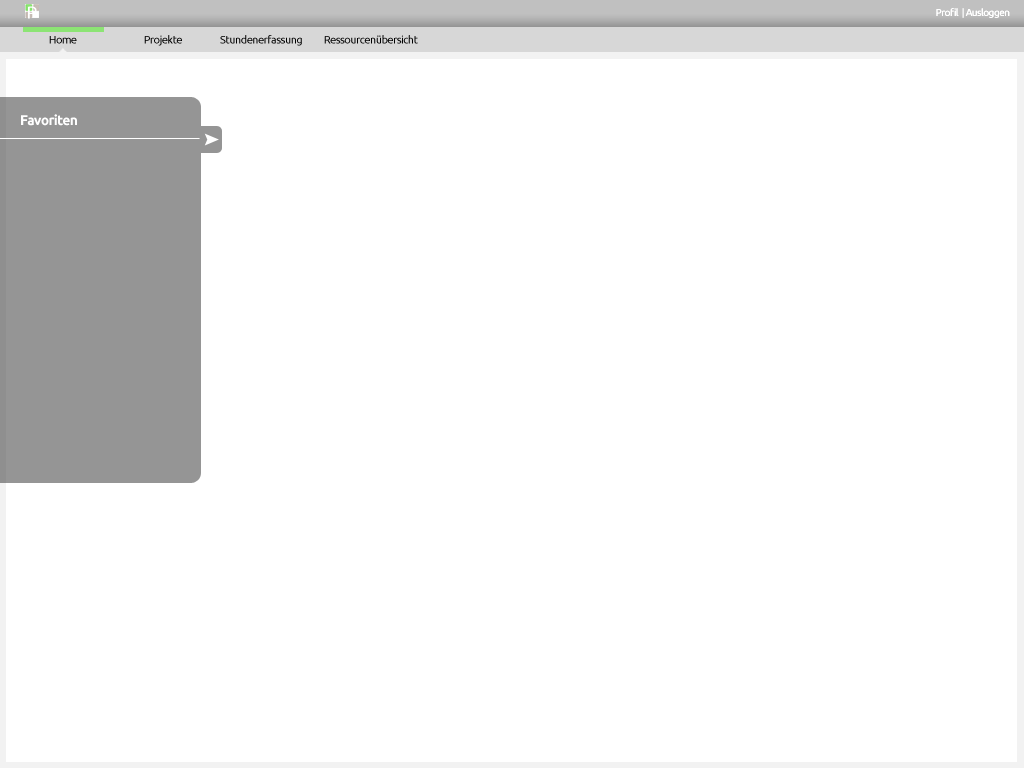
<style>
.page{position:relative;width:1024px;height:768px;background:#ffffff}
.page>*{position:absolute;margin:0}
.t1{font:17px "Ubuntu";letter-spacing:-0.05em;color:#ffffff}
.t2{font:10px "Ubuntu";letter-spacing:-0.05em;color:#ffffff}
.t3{font:11px "Ubuntu";letter-spacing:-0.05em;color:#000000}
.t4{font:14px "Ubuntu-Bold";letter-spacing:-0.05em;color:#ffffff}
</style>
<div class="page">
<p class="t1" style="left:28px;top:6px;width:9px;height:13px">P</p>
<p class="t2" style="left:936px;top:8px;width:74px;height:10px">Profil  | Ausloggen</p>
<p class="t3" style="left:49px;top:36px;width:28px;height:8px">Home</p>
<p class="t3" style="left:144px;top:35px;width:38px;height:11px">Projekte</p>
<p class="t3" style="left:220px;top:35px;width:82px;height:11px">Stundenerfassung</p>
<p class="t3" style="left:324px;top:35px;width:94px;height:9px">Ressourcenübersicht</p>
<p class="t4" style="left:21px;top:114px;width:56px;height:12px">Favoriten</p>
</div>
